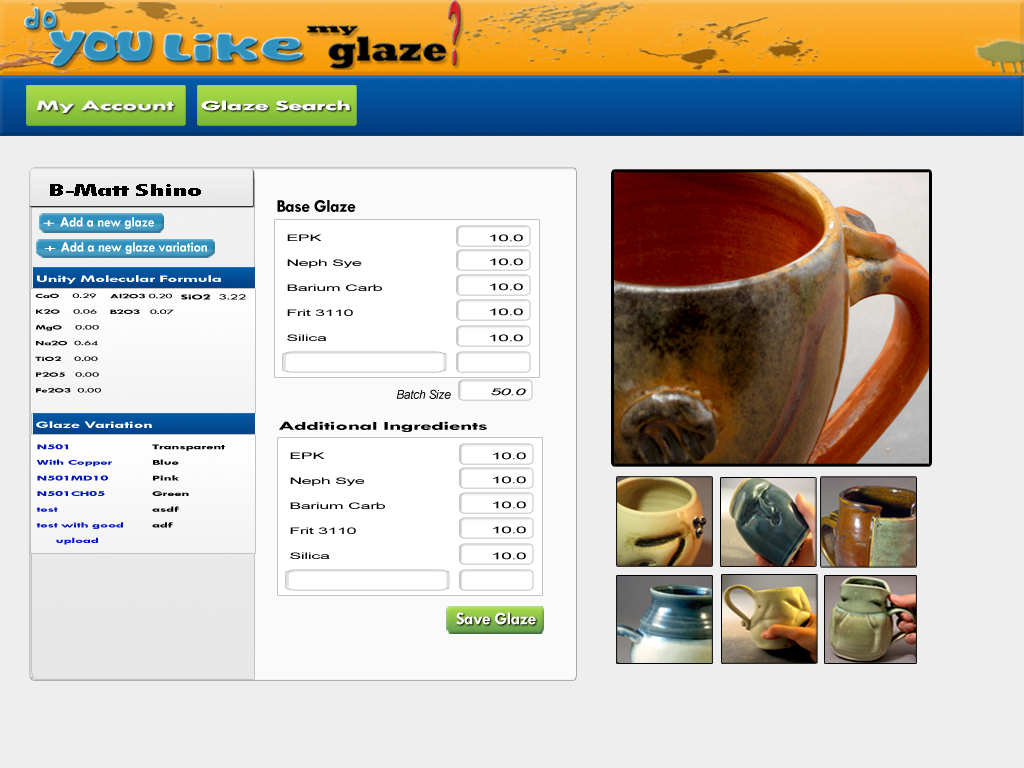
<style>
.page{position:relative;width:1024px;height:768px;background:#eeeeee}
.page>*{position:absolute;margin:0}
.t1{font:14.6px "TwCenMT-Bold";letter-spacing:-0.025em;color:#ffffff;scale:2 1}
.t2{font:16.9px "TwCenMT-CondensedExtraBold";letter-spacing:-0.025em;color:#000000;scale:2 1}
.t3{font:18px "TwCenMT-Bold";letter-spacing:-0.025em;color:#010101}
.t4{font:14px "TwCenMT-Bold";letter-spacing:-0.025em;color:#ffffff}
.t5{font:10px "TwCenMT-Bold";letter-spacing:-0.025em;color:#ffffff;scale:2 1}
.t6{font:9.6px "TwCenMT-Bold";letter-spacing:-0.025em;color:#ffffff;scale:2 1}
.t7{font:9px/25px "ArialMT";letter-spacing:-0.025em;color:#000000;scale:2 1}
.t8{font:9.4px "ArialMT";letter-spacing:-0.025em;color:#000000;scale:2 1}
.t9{font:9.9px "TwCenMT-Bold";letter-spacing:-0.025em;color:#ffffff;scale:1.93 1}
.t10{font:6.8px/15.8px "TwCenMT-Bold";letter-spacing:-0.025em;color:#000000;scale:2 1}
.t11{font:6.8px/15.8px "TwCenMT-Regular";letter-spacing:-0.025em;color:#000000;scale:2 1}
.t12{font:7.9px "TwCenMT-Bold";letter-spacing:-0.025em;color:#000000;scale:2 1}
.t13{font:7.9px "TwCenMT-Regular";letter-spacing:-0.025em;color:#000000;scale:2 1}
.t14{font:12px "Arial-ItalicMT";letter-spacing:-0.025em;color:#000000}
.t15{font:9.4px "Arial-ItalicMT";letter-spacing:-0.025em;color:#000000;scale:2 1}
.t16{font:9.9px "TwCenMT-Bold";letter-spacing:-0.025em;color:#ffffff;scale:1.92 1}
.t17{font:12px "TwCenMT-Bold";letter-spacing:-0.025em;color:#010101;scale:2 1}
.t18{font:7.8px/15.6px "TwCenMT-Bold";letter-spacing:-0.025em;color:#0013c3;scale:2 1}
.t19{font:7.8px/15.6px "TwCenMT-Bold";letter-spacing:-0.025em;color:#000000;scale:2 1}
.t20{font:18px "TwCenMT-Bold";letter-spacing:-0.025em;color:#ffffff}
</style>
<div class="page">
<p class="t1" style="left:201px;top:100px;width:149px;height:11px">Glaze Search</p>
<p class="t2" style="left:50px;top:184px;width:151px;height:12px">B-Matt Shino</p>
<p class="t3" style="left:277px;top:200px;width:79px;height:12px">Base Glaze</p>
<p class="t4" style="left:43px;top:217px;width:111px;height:12px"><span class="t5">+ </span>Add a new glaze</p>
<p class="t4" style="left:44px;top:242px;width:163px;height:12px"><span class="t6">+ </span>Add a new glaze variation</p>
<p class="t7" style="left:287px;top:234px;width:95px;height:107px">EPK<br>Neph Sye<br>Barium Carb<br>Frit 3110<br>Silica</p>
<p class="t8" style="left:490px;top:234px;width:33px;height:8px">10.0</p>
<p class="t8" style="left:490px;top:258px;width:33px;height:8px">10.0</p>
<p class="t9" style="left:37px;top:275px;width:184px;height:9px">Unity Molecular Formula</p>
<p class="t10" style="left:35px;top:293px;width:66px;height:100px">CaO    <span class="t11">0.29<br></span>K2O    <span class="t11">0.06<br></span>MgO    <span class="t11">0.00<br></span>Na2O  <span class="t11">0.64<br></span>TiO2    <span class="t11">0.00<br></span>P2O5   <span class="t11">0.00<br></span>Fe2O3  <span class="t11">0.00</span></p>
<p class="t10" style="left:110px;top:293px;width:64px;height:22px">Al2O3 <span class="t11">0.20<br></span>B2O3   <span class="t11">0.07</span></p>
<p class="t12" style="left:181px;top:294px;width:65px;height:6px">SiO2  <span class="t13">3.22</span></p>
<p class="t8" style="left:490px;top:283px;width:33px;height:8px">10.0</p>
<p class="t8" style="left:490px;top:308px;width:33px;height:8px">10.0</p>
<p class="t8" style="left:490px;top:334px;width:33px;height:8px">10.0</p>
<p class="t14" style="left:396px;top:389px;width:55px;height:10px">Batch Size</p>
<p class="t15" style="left:491px;top:388px;width:35px;height:8px">50.0</p>
<p class="t16" style="left:36px;top:421px;width:116px;height:7px">Glaze Variation</p>
<p class="t17" style="left:279px;top:421px;width:208px;height:11px">Additional Ingredients</p>
<p class="t18" style="left:36px;top:444px;width:189px;height:101px">N501<span class="t19">  Transparent<br></span>With Copper<span class="t19"> Blue<br></span>N501MD10<span class="t19"> Pink<br></span>N501CH05<span class="t19"> Green<br></span>test<span class="t19">  asdf<br></span>test with good  <span class="t19">adf<br></span>     upload</p>
<p class="t7" style="left:290px;top:452px;width:95px;height:107px">EPK<br>Neph Sye<br>Barium Carb<br>Frit 3110<br>Silica</p>
<p class="t8" style="left:493px;top:452px;width:33px;height:8px">10.0</p>
<p class="t8" style="left:493px;top:476px;width:33px;height:8px">10.0</p>
<p class="t8" style="left:493px;top:501px;width:33px;height:8px">10.0</p>
<p class="t8" style="left:493px;top:526px;width:33px;height:8px">10.0</p>
<p class="t8" style="left:493px;top:552px;width:33px;height:8px">10.0</p>
<p class="t20" style="left:456px;top:612px;width:80px;height:13px">Save Glaze</p>
</div>
